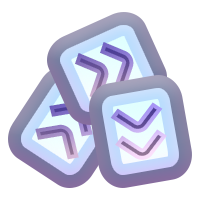
<style>
.page{position:relative;width:200px;height:200px;background:#ffffff}
.page>*{position:absolute;margin:0}
.t1{font:96px "GilbertBoldPreview5";letter-spacing:-0.08em;scale:0.93 1}
</style>
<div class="page">
<p class="t1" style="left:75px;top:42px;width:59px;height:59px;rotate:-24deg">&gt;&gt;</p>
<p class="t1" style="left:35px;top:101px;width:58px;height:59px;rotate:-57deg">&gt;&gt;</p>
<p class="t1" style="left:110px;top:102px;width:57px;height:58px;rotate:80deg">&gt;&gt;</p>
</div>
